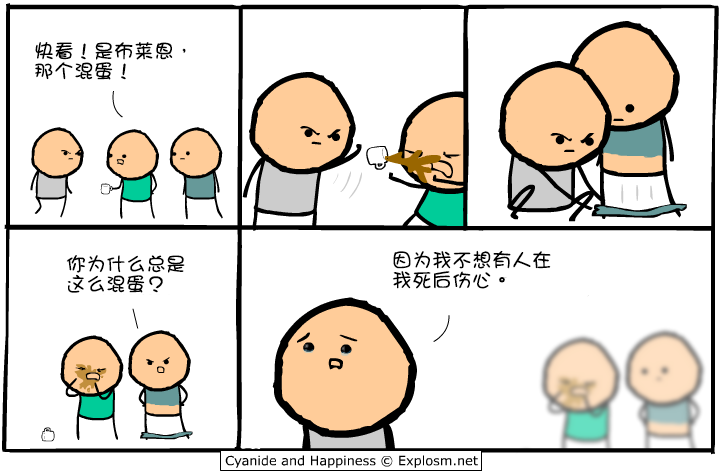
<style>
.page{position:relative;width:720px;height:475px;background:#ffffff}
.page>*{position:absolute;margin:0}
.t1{font:20px/20px "DFGirl";color:#000000}
</style>
<div class="page">
<p class="t1" style="left:35px;top:42px;width:151px;height:38px">快看！是布莱恩，<br>那个混蛋！</p>
<p class="t1" style="left:66px;top:255px;width:119px;height:38px">你为什么总是<br>这么混蛋？</p>
<p class="t1" style="left:392px;top:250px;width:159px;height:39px">因为我不想有人在<br>我死后伤心。</p>
</div>
